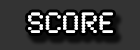
<style>
.page{position:relative;width:140px;height:50px;background:#333333}
.page>*{position:absolute;margin:0}
.t1{font:30px "SynchroLET";color:#ffffff}
</style>
<div class="page">
<p class="t1" style="left:28px;top:12px;width:85px;height:21px">SCORE</p>
</div>
